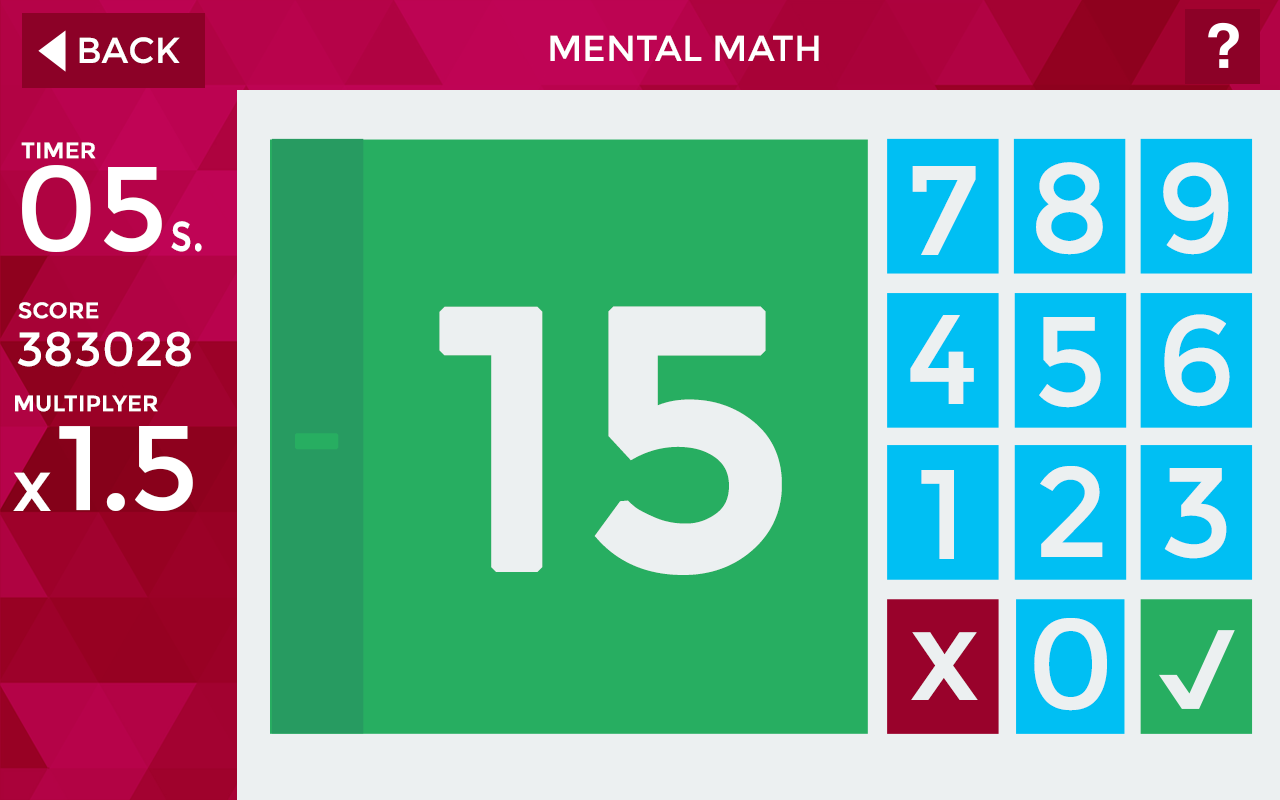
<style>
.page{position:relative;width:1280px;height:800px;background:#27ae61}
.page>*{position:absolute;margin:0}
.t1{font:36px "Montserrat-Regular";color:#ffffff}
.t2{font:36px "Montserrat-Regular";color:#ffffff;text-transform:uppercase}
.t3{font:22px "Montserrat-Regular";color:#ffffff;font-weight:bold}
.t4{font:120px "Montserrat-Regular";color:#ffffff}
.t5{font:127.4px "Montserrat-Regular";color:#ecf0f1}
.t6{font:55px "Montserrat-Regular";color:#ffffff;scale:0.8 1}
.t7{font:365px "Montserrat-Regular";color:#ecf0f1;text-transform:uppercase;font-weight:bold}
.t8{font:48px "Montserrat-Regular";color:#ffffff}
.t9{font:120px "Montserrat-Regular";letter-spacing:-0.025em;color:#ffffff}
.t10{font:120px "Montserrat-Regular";color:#27ae61;text-transform:uppercase;font-weight:bold}
.t11{font:72px "Montserrat-Regular";color:#ffffff}
</style>
<div class="page">
<p class="t1" style="left:79px;top:37px;width:101px;height:27px">BACK</p>
<p class="t2" style="left:550px;top:35px;width:269px;height:26px">Mental math</p>
<p class="t3" style="left:21px;top:142px;width:75px;height:17px">TIMER</p>
<p class="t4" style="left:22px;top:165px;width:140px;height:87px">05</p>
<p class="t5" style="left:912px;top:166px;width:64px;height:89px">7</p>
<p class="t5" style="left:1036px;top:162px;width:67px;height:93px">8</p>
<p class="t5" style="left:1163px;top:162px;width:66px;height:93px">9</p>
<p class="t6" style="left:171px;top:221px;width:31px;height:31px">s.</p>
<p class="t3" style="left:18px;top:302px;width:81px;height:17px">SCORE</p>
<p class="t7" style="left:439px;top:306px;width:343px;height:269px">15</p>
<p class="t5" style="left:910px;top:315px;width:64px;height:89px">4</p>
<p class="t5" style="left:1039px;top:317px;width:62px;height:91px">5</p>
<p class="t5" style="left:1164px;top:314px;width:66px;height:93px">6</p>
<p class="t8" style="left:17px;top:331px;width:174px;height:36px">383028</p>
<p class="t3" style="left:15px;top:395px;width:143px;height:17px">MULTIPLYER</p>
<p class="t9" style="left:59px;top:426px;width:134px;height:85px">1.5</p>
<p class="t10" style="left:295px;top:433px;width:44px;height:17px">-</p>
<p class="t11" style="left:13px;top:472px;width:38px;height:39px">x</p>
<p class="t5" style="left:921px;top:470px;width:33px;height:89px">1</p>
<p class="t5" style="left:1040px;top:466px;width:63px;height:91px">2</p>
<p class="t5" style="left:1164px;top:468px;width:63px;height:91px">3</p>
<p class="t5" style="left:1034px;top:618px;width:73px;height:93px">0</p>
<p class="t5" style="left:911px;top:632px;width:67px;height:68px">x</p>
</div>
